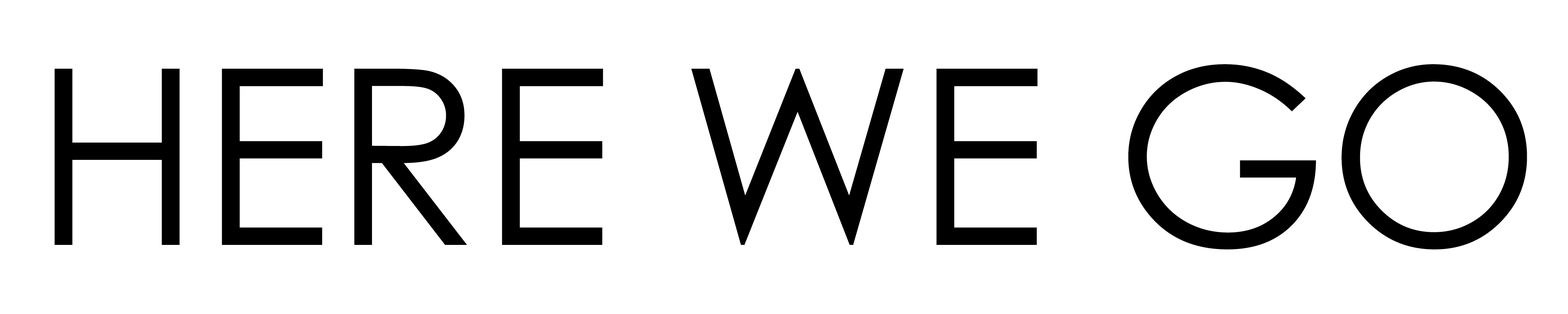
<style>
.page{position:relative;width:1568px;height:314px;background:#ffffff}
.page>*{position:absolute;margin:0}
.t1{font:245px "CenturyGothic";color:#000000}
</style>
<div class="page">
<p class="t1" style="left:54px;top:64px;width:1473px;height:185px">HERE WE GO</p>
</div>
